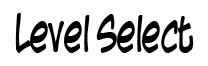
<style>
.page{position:relative;width:208px;height:66px;background:#ffffff}
.page>*{position:absolute;margin:0}
.t1{font:48px "BlambotCasual";letter-spacing:-0.05em;color:#000000;scale:0.75 1}
</style>
<div class="page">
<p class="t1" style="left:15px;top:13px;width:179px;height:40px">Level Select</p>
</div>
